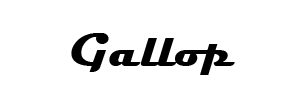
<style>
.page{position:relative;width:300px;height:100px;background:#ffffff}
.page>*{position:absolute;margin:0}
.t1{font:48px "Magneto-Bold";color:#000000}
</style>
<div class="page">
<p class="t1" style="left:71px;top:33px;width:164px;height:42px">Gallop</p>
</div>
